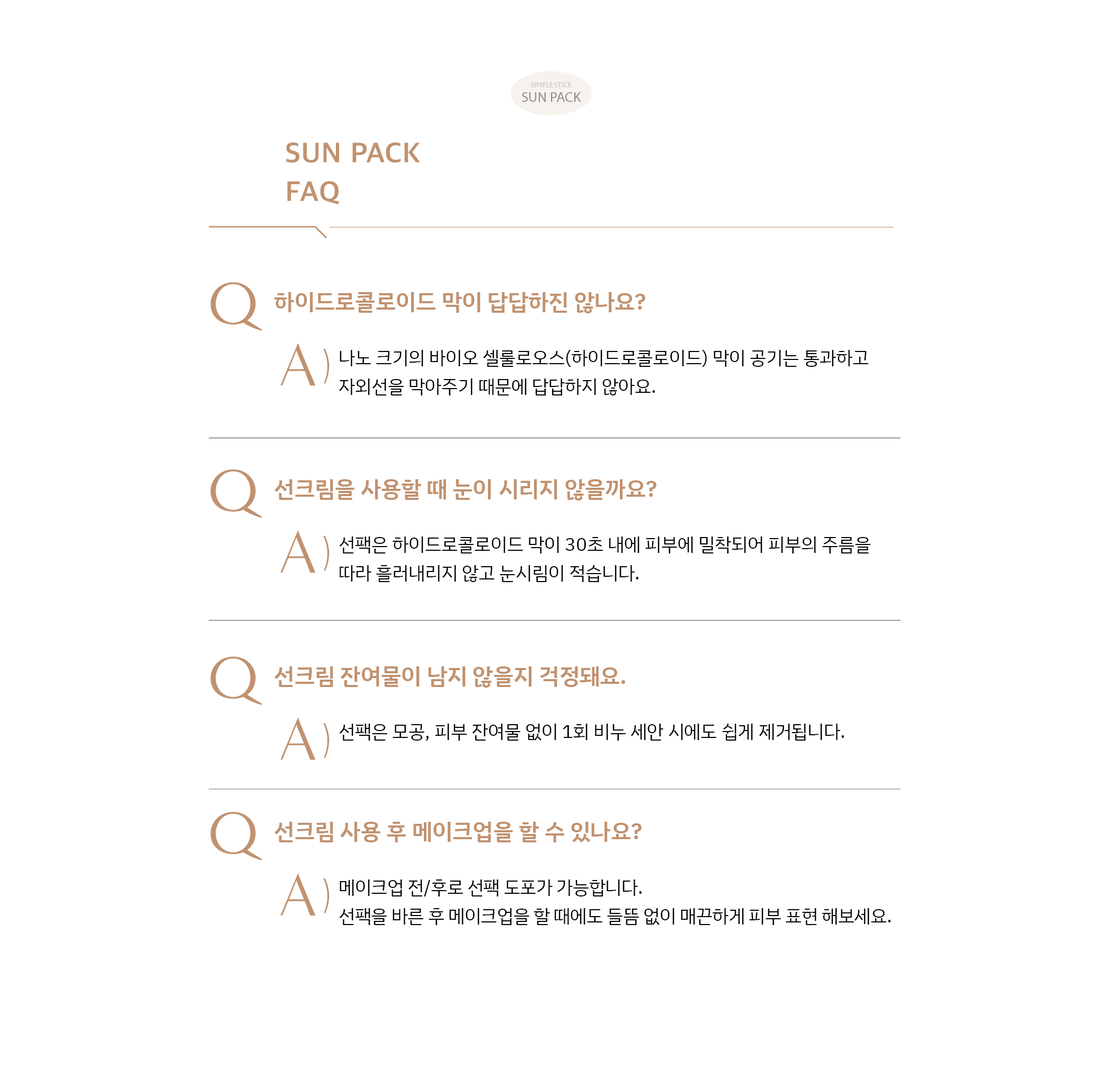
<style>
.page{position:relative;width:1102px;height:1082px;background:#ffffff}
.page>*{position:absolute;margin:0}
.t1{font:7.5px "AritaSans-Bold";letter-spacing:-0.022em;color:#d2cec8}
.t2{font:14.2px "MyriadPro-Regular";letter-spacing:0.004em;color:#898b8d}
.t3{font:26.7px/39px "SDGothicNeoa-gBd";letter-spacing:0.013em;color:#c1926f;scale:1.03 1}
.t4{font:61.2px "MinervaModern-Regular";color:#c1926f}
.t5{font:22.6px "IBMPlexSansKR-SemiBold";letter-spacing:0.005em;color:#c1926f}
.t6{font:43.1px "MinervaModern-Regular";color:#c1926f}
.t7{font:18.5px/28.8px "IBMPlexSansKR-Regular";letter-spacing:-0.004em;color:#000000}
.t8{font:18.5px "IBMPlexSansKR-Regular";letter-spacing:-0.004em;color:#000000}
.t9{font:18.5px/28.8px "IBMPlexSansKR-Regular";letter-spacing:-0.014em;color:#000000}
</style>
<div class="page">
<p class="t1" style="left:531px;top:82px;width:41px;height:5px">SIMFLE STICK</p>
<p class="t2" style="left:522px;top:92px;width:59px;height:10px">SUN PACK</p>
<p class="t3" style="left:286px;top:142px;width:134px;height:63px">SUN PACK<br>FAQ</p>
<p class="t4" style="left:210px;top:282px;width:52px;height:49px">Q</p>
<p class="t5" style="left:275px;top:292px;width:371px;height:21px">하이드로콜로이드 막이 답답하진 않나요?</p>
<p class="t4" style="left:280px;top:343px;width:36px;height:42px">A</p>
<p class="t6" style="left:323px;top:348px;width:7px;height:36px">)</p>
<p class="t7" style="left:339px;top:350px;width:530px;height:45px">나노 크기의 바이오 셀룰로오스(하이드로콜로이드) 막이 공기는 통과하고 자외선을 막아주기 때문에 답답하지 않아요.</p>
<p class="t4" style="left:210px;top:469px;width:52px;height:49px">Q</p>
<p class="t5" style="left:275px;top:479px;width:382px;height:21px">선크림을 사용할 때 눈이 시리지 않을까요?</p>
<p class="t4" style="left:280px;top:531px;width:36px;height:41px">A</p>
<p class="t6" style="left:323px;top:535px;width:7px;height:36px">)</p>
<p class="t7" style="left:339px;top:536px;width:532px;height:46px">선팩은 하이드로콜로이드 막이 30초 내에 피부에 밀착되어 피부의 주름을 따라 흘러내리지 않고 눈시림이 적습니다.</p>
<p class="t4" style="left:210px;top:656px;width:52px;height:49px">Q</p>
<p class="t5" style="left:275px;top:666px;width:350px;height:21px">선크림 잔여물이 남지 않을지 걱정돼요.</p>
<p class="t4" style="left:280px;top:718px;width:36px;height:41px">A</p>
<p class="t6" style="left:323px;top:722px;width:7px;height:36px">)</p>
<p class="t8" style="left:339px;top:723px;width:505px;height:17px">선팩은 모공, 피부 잔여물 없이 1회 비누 세안 시에도 쉽게 제거됩니다.</p>
<p class="t4" style="left:210px;top:811px;width:52px;height:49px">Q</p>
<p class="t5" style="left:275px;top:821px;width:367px;height:21px">선크림 사용 후 메이크업을 할 수 있나요?</p>
<p class="t4" style="left:280px;top:873px;width:36px;height:42px">A</p>
<p class="t6" style="left:323px;top:878px;width:7px;height:35px">)</p>
<p class="t9" style="left:339px;top:879px;width:552px;height:46px">메이크업 전/후로 선팩 도포가 가능합니다. <br>선팩을 바른 후 메이크업을 할 때에도 들뜸 없이 매끈하게 피부 표현 해보세요.</p>
</div>
